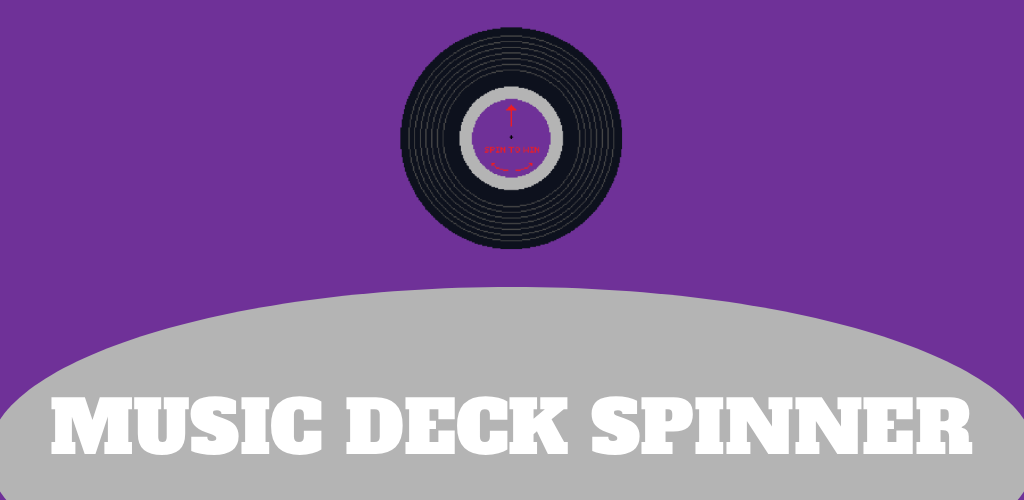
<style>
.page{position:relative;width:1024px;height:500px;background:#6f3198}
.page>*{position:absolute;margin:0}
.t1{font:73px "AlfaSlabOne-Regular";color:#ffffff}
</style>
<div class="page">
<p class="t1" style="left:51px;top:396px;width:922px;height:60px">MUSIC DECK SPINNER</p>
</div>
